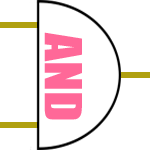
<style>
.page{position:relative;width:150px;height:150px;background:#ffffff}
.page>*{position:absolute;margin:0}
.t1{font:47.4px "Impact";color:#ff6898;scale:1.17 1}
</style>
<div class="page">
<p class="t1" style="left:44px;top:32px;width:38px;height:88px;rotate:90deg">AND</p>
</div>
